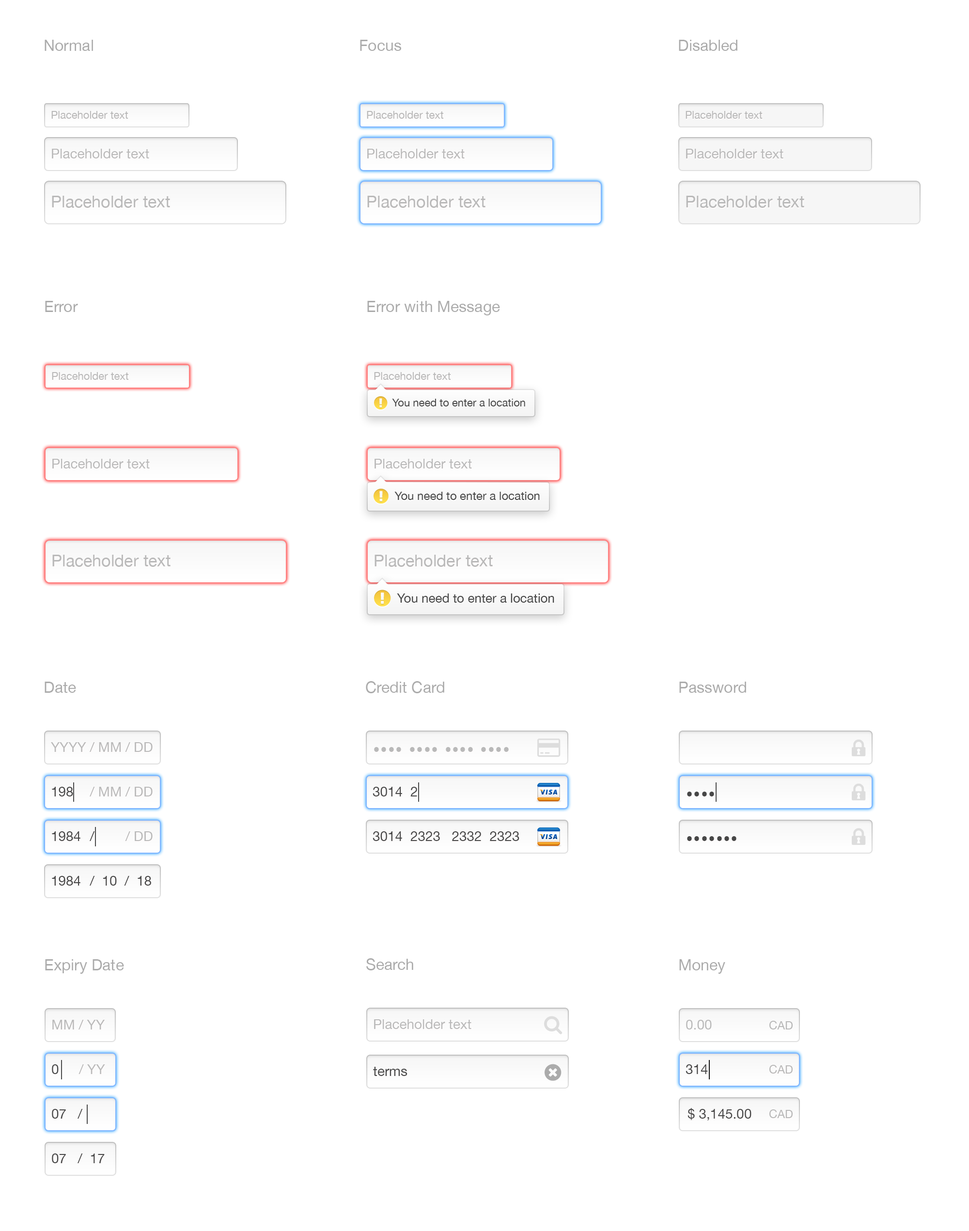
<style>
.page{position:relative;width:969px;height:1231px;background:#ffffff}
.page>*{position:absolute;margin:0}
.t1{font:15.5px "HelveticaNeue";color:#ababab}
.t2{font:10.7px "HelveticaNeue";color:#b9b9b9}
.t3{font:13.6px "HelveticaNeue";color:#b9b9b9}
.t4{font:16.5px "HelveticaNeue";color:#b9b9b9}
.t5{font:10.7px "HelveticaNeue";color:#474747}
.t6{font:11.6px "HelveticaNeue";color:#474747}
.t7{font:12.6px "HelveticaNeue";color:#474747}
.t8{font:21.3px "HelveticaNeue";color:#b9b9b9}
.t9{font:13.6px "HelveticaNeue";color:#474747}
.t10{font:21.3px "HelveticaNeue";color:#474747}
.t11{font:11.6px "HelveticaNeue";color:#b9b9b9}
.t12{font:13.6px "HelveticaNeue";color:#464748}
</style>
<div class="page">
<p class="t1" style="left:45px;top:40px;width:48px;height:11px">Normal</p>
<p class="t1" style="left:360px;top:40px;width:41px;height:11px">Focus</p>
<p class="t1" style="left:679px;top:40px;width:58px;height:11px">Disabled</p>
<p class="t2" style="left:51px;top:111px;width:77px;height:8px">Placeholder text</p>
<p class="t2" style="left:367px;top:111px;width:77px;height:8px">Placeholder text</p>
<p class="t2" style="left:685px;top:111px;width:77px;height:8px">Placeholder text</p>
<p class="t3" style="left:52px;top:149px;width:97px;height:9px">Placeholder text</p>
<p class="t3" style="left:367px;top:149px;width:98px;height:9px">Placeholder text</p>
<p class="t3" style="left:686px;top:149px;width:97px;height:9px">Placeholder text</p>
<p class="t4" style="left:52px;top:196px;width:118px;height:12px">Placeholder text</p>
<p class="t4" style="left:367px;top:196px;width:118px;height:12px">Placeholder text</p>
<p class="t4" style="left:686px;top:196px;width:118px;height:12px">Placeholder text</p>
<p class="t1" style="left:45px;top:301px;width:33px;height:11px">Error</p>
<p class="t1" style="left:367px;top:301px;width:133px;height:14px">Error with Message</p>
<p class="t2" style="left:52px;top:372px;width:77px;height:8px">Placeholder text</p>
<p class="t2" style="left:374px;top:372px;width:77px;height:8px">Placeholder text</p>
<p class="t5" style="left:392px;top:399px;width:133px;height:7px">You need to enter a location</p>
<p class="t3" style="left:52px;top:459px;width:98px;height:9px">Placeholder text</p>
<p class="t3" style="left:374px;top:459px;width:98px;height:9px">Placeholder text</p>
<p class="t6" style="left:394px;top:492px;width:146px;height:8px">You need to enter a location</p>
<p class="t4" style="left:52px;top:555px;width:119px;height:12px">Placeholder text</p>
<p class="t4" style="left:374px;top:555px;width:119px;height:12px">Placeholder text</p>
<p class="t7" style="left:397px;top:593px;width:157px;height:10px">You need to enter a location</p>
<p class="t1" style="left:45px;top:682px;width:31px;height:11px">Date</p>
<p class="t1" style="left:366px;top:681px;width:78px;height:12px">Credit Card</p>
<p class="t1" style="left:679px;top:682px;width:67px;height:11px">Password</p>
<p class="t3" style="left:51px;top:742px;width:102px;height:10px">YYYY / MM / DD</p>
<p class="t8" style="left:374px;top:747px;width:135px;height:5px">•••• •••• •••• ••••</p>
<p class="t9" style="left:52px;top:787px;width:21px;height:9px">198</p>
<p class="t3" style="left:90px;top:787px;width:63px;height:9px">/ MM / DD</p>
<p class="t9" style="left:372px;top:787px;width:45px;height:9px">3014  2</p>
<p class="t10" style="left:687px;top:792px;width:27px;height:4px">••••</p>
<p class="t9" style="left:52px;top:831px;width:43px;height:10px">1984  /</p>
<p class="t3" style="left:125px;top:831px;width:28px;height:10px">/ DD</p>
<p class="t9" style="left:372px;top:831px;width:147px;height:10px">3014  2323   2332  2323</p>
<p class="t10" style="left:687px;top:836px;width:49px;height:5px">•••••••</p>
<p class="t9" style="left:52px;top:876px;width:99px;height:9px">1984  /  10  /  18</p>
<p class="t1" style="left:45px;top:959px;width:79px;height:15px">Expiry Date</p>
<p class="t1" style="left:366px;top:958px;width:47px;height:12px">Search</p>
<p class="t1" style="left:679px;top:959px;width:46px;height:15px">Money</p>
<p class="t3" style="left:52px;top:1020px;width:53px;height:9px">MM / YY</p>
<p class="t3" style="left:374px;top:1019px;width:97px;height:10px">Placeholder text</p>
<p class="t3" style="left:686px;top:1020px;width:26px;height:9px">0.00</p>
<p class="t11" style="left:769px;top:1021px;width:24px;height:8px">CAD</p>
<p class="t12" style="left:52px;top:1064px;width:7px;height:10px">0</p>
<p class="t3" style="left:78px;top:1064px;width:27px;height:10px">/ YY</p>
<p class="t9" style="left:373px;top:1067px;width:34px;height:9px">terms</p>
<p class="t9" style="left:685px;top:1064px;width:23px;height:10px">314</p>
<p class="t11" style="left:769px;top:1065px;width:24px;height:8px">CAD</p>
<p class="t9" style="left:52px;top:1109px;width:31px;height:9px">07   /</p>
<p class="t9" style="left:687px;top:1108px;width:64px;height:12px">$ 3,145.00</p>
<p class="t11" style="left:769px;top:1109px;width:24px;height:9px">CAD</p>
<p class="t9" style="left:52px;top:1153px;width:53px;height:10px">07   /  17</p>
</div>
